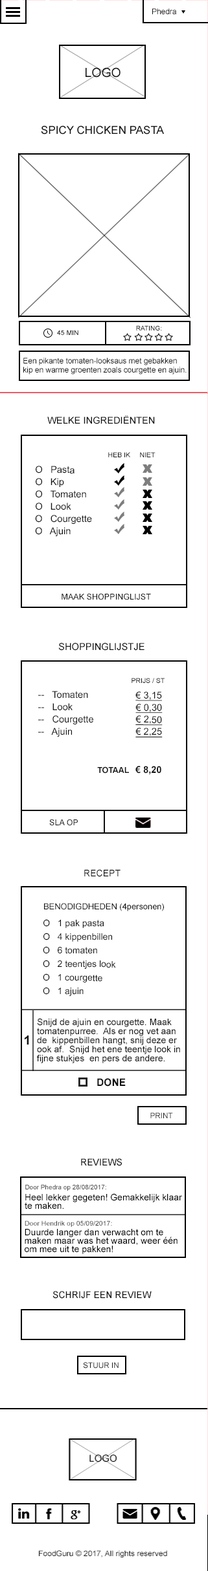
<style>
.page{position:relative;width:208px;height:1571px;background:#ffffff}
.page>*{position:absolute;margin:0}
.t1{font:7.8px "ArialMT";color:#111111}
.t2{font:12.6px "ArialMT";color:#111111}
.t3{font:11px "ArialMT";color:#111111}
.t4{font:6.5px "ArialMT";color:#111111;scale:1.03 1}
.t5{font:6.5px "ArialMT";color:#111111}
.t6{font:7.7px/9.5px "ArialMT";color:#111111}
.t7{font:9.5px "ArialMT";color:#111111}
.t8{font:6.8px "ArialMT";color:#111111}
.t9{font:9.5px/12.2px "ArialMT";color:#111111}
.t10{font:8.1px "ArialMT";color:#111111}
.t11{font:9.7px "ArialMT";color:#111111}
.t12{font:6.9px "ArialMT";color:#111111}
.t13{font:9.5px/12.2px "ArialMT";color:#111111;text-decoration:underline}
.t14{font:8.1px "Arial-BoldMT";color:#111111}
.t15{font:9.5px "Arial-BoldMT";color:#111111}
.t16{font:9.3px "ArialMT";color:#111111}
.t17{font:8.3px "ArialMT";color:#111111}
.t18{font:9.1px/13.6px "ArialMT";color:#111111}
.t19{font:9.1px/9.1px "ArialMT";color:#111111}
.t20{font:12.6px "Arial-BoldMT";color:#111111}
.t21{font:10.3px "Arial-BoldMT";color:#111111}
.t22{font:7.6px "ArialMT";color:#111111}
.t23{font:9px/8.5px "ArialMT";color:#000000}
.t24{font:6.4px "ArialMT";color:#3f3f3f}
.t25{font:6.5px "ArialMT";color:#3f3f3f;scale:1.06 1}
</style>
<div class="page">
<p class="t1" style="left:152px;top:8px;width:24px;height:6px">Phedra</p>
<p class="t2" style="left:85px;top:67px;width:35px;height:11px">LOGO</p>
<p class="t3" style="left:41px;top:125px;width:123px;height:10px">SPICY CHICKEN PASTA</p>
<p class="t4" style="left:57px;top:330px;width:21px;height:5px">45 MIN</p>
<p class="t5" style="left:136px;top:325px;width:26px;height:5px">RATING:</p>
<p class="t6" style="left:23px;top:358px;width:163px;height:16px">Een pikante tomaten-looksaus met gebakken <br>kip en warme groenten zoals courgette en ajuin.</p>
<p class="t7" style="left:47px;top:415px;width:108px;height:9px">WELKE INGREDIËNTEN</p>
<p class="t8" style="left:108px;top:452px;width:47px;height:5px">HEB IK     NIET</p>
<p class="t9" style="left:35px;top:466px;width:57px;height:70px">O   Pasta<br>O   Kip<br>O   Tomaten<br>O   Look<br>O   Courgette<br>O   Ajuin</p>
<p class="t10" style="left:61px;top:593px;width:90px;height:7px">MAAK SHOPPINGLIJST</p>
<p class="t11" style="left:58px;top:643px;width:86px;height:8px">SHOPPINGLIJSTJE</p>
<p class="t12" style="left:131px;top:678px;width:33px;height:5px">PRIJS / ST</p>
<p class="t9" style="left:38px;top:691px;width:124px;height:46px">--   Tomaten                  <span class="t13">€ 3,15<br></span>--   Look                        <span class="t13">€ 0,30<br></span>--   Courgette                <span class="t13">€ 2,50<br></span>--   Ajuin                        <span class="t13">€ 2,25</span></p>
<p class="t14" style="left:97px;top:766px;width:64px;height:9px">TOTAAL   <span class="t15">€ 8,20</span></p>
<p class="t10" style="left:49px;top:819px;width:29px;height:7px">SLA OP</p>
<p class="t16" style="left:84px;top:869px;width:36px;height:8px">RECEPT</p>
<p class="t17" style="left:44px;top:903px;width:120px;height:8px">BENODIGDHEDEN (4personen)</p>
<p class="t18" style="left:43px;top:919px;width:73px;height:77px">O   1 pak pasta<br>O   4 kippenbillen<br>O   6 tomaten<br>O   2 teentjes look<br>O   1 courgette<br>O   1 ajuin</p>
<p class="t19" style="left:37px;top:1018px;width:143px;height:45px">Snijd de ajuin en courgette. Maak <br>tomatenpurree.  Als er nog vet aan <br>de  kippenbillen hangt, snij deze er <br>ook af.  Snijd het ene teentje look in<br>fijne stukjes  en pers de andere.</p>
<p class="t20" style="left:25px;top:1035px;width:4px;height:9px">1</p>
<p class="t21" style="left:97px;top:1078px;width:28px;height:9px">DONE</p>
<p class="t22" style="left:150px;top:1112px;width:23px;height:6px">PRINT</p>
<p class="t16" style="left:81px;top:1158px;width:41px;height:8px">REVIEWS</p>
<p class="t23" style="left:25px;top:1193px;width:157px;height:16px">Heel lekker gegeten! Gemakkelijk klaar<br>te maken.</p>
<p class="t24" style="left:25px;top:1184px;width:81px;height:7px">Door Phedra op 28/08/2017:</p>
<p class="t23" style="left:25px;top:1229px;width:152px;height:25px">Duurde langer dan verwacht om te <br>maken maar was het waard, weer één <br>om mee uit te pakken!</p>
<p class="t25" style="left:25px;top:1220px;width:87px;height:7px">Door Hendrik op 05/09/2017:</p>
<p class="t16" style="left:52px;top:1291px;width:99px;height:8px">SCHRIJF EEN REVIEW</p>
<p class="t22" style="left:83px;top:1362px;width:35px;height:7px">STUUR IN</p>
</div>
